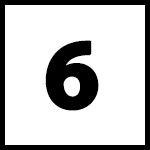
<style>
.page{position:relative;width:150px;height:150px;background:#ffffff}
.page>*{position:absolute;margin:0}
.t1{font:100px "MyriadPro-Bold";letter-spacing:0.025em;color:#000000;text-transform:uppercase;font-weight:bold}
</style>
<div class="page">
<p class="t1" style="left:45px;top:40px;width:54px;height:71px">6</p>
</div>
